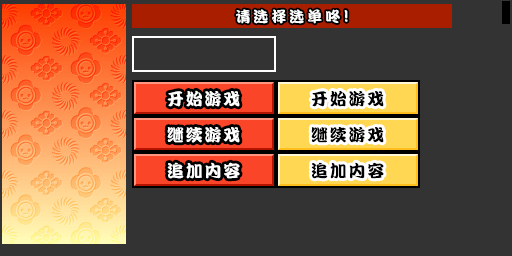
<style>
.page{position:relative;width:512px;height:256px;background:#333333}
.page>*{position:absolute;margin:0}
.t1{font:15px "DFPKanTingLiuW9";letter-spacing:0.2em;color:#ffffff}
.t2{font:17px "DFPKanTingLiuW9";letter-spacing:0.2em;color:#ffffff}
.t3{font:17px "DFPKanTingLiuW9";letter-spacing:0.1em;color:#ffffff}
.t4{font:17px "DFPKanTingLiuW9";letter-spacing:0.1em;color:#000000}
</style>
<div class="page">
<p class="t1" style="left:236px;top:9px;width:112px;height:15px">请选择选单咚<span class="t2">!</span></p>
<p class="t3" style="left:167px;top:90px;width:73px;height:17px">开始游戏</p>
<p class="t4" style="left:311px;top:90px;width:73px;height:17px">开始游戏</p>
<p class="t3" style="left:167px;top:127px;width:73px;height:16px">继续游戏</p>
<p class="t4" style="left:311px;top:127px;width:73px;height:16px">继续游戏</p>
<p class="t3" style="left:167px;top:162px;width:73px;height:17px">追加内容</p>
<p class="t4" style="left:311px;top:162px;width:73px;height:17px">追加内容</p>
</div>
